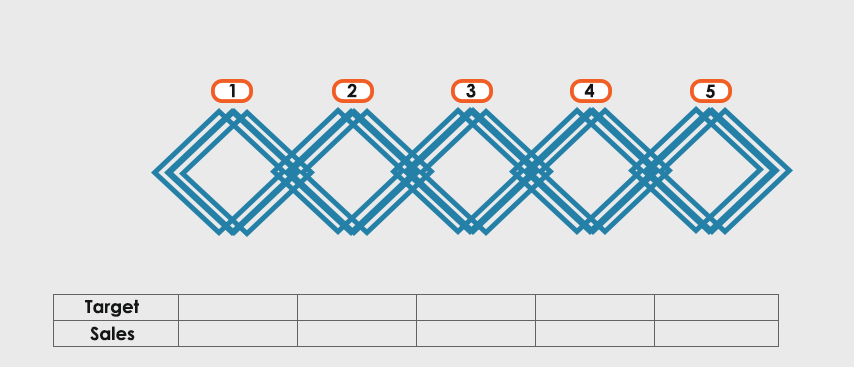
<style>
.page{position:relative;width:854px;height:367px;background:#eaeaea}
.page>*{position:absolute;margin:0}
.t1{font:18.2px "CenturyGothic-Bold";color:#151616}
.t2{font:18.1px "CenturyGothic-Bold";color:#151616}
.t3{font:18px "CenturyGothic-Bold";color:#151616}
</style>
<div class="page">
<p class="t1" style="left:229px;top:84px;width:6px;height:14px">1</p>
<p class="t1" style="left:347px;top:83px;width:10px;height:15px">2</p>
<p class="t1" style="left:466px;top:83px;width:10px;height:15px">3</p>
<p class="t1" style="left:584px;top:83px;width:11px;height:15px">4</p>
<p class="t2" style="left:705px;top:84px;width:10px;height:14px">5</p>
<p class="t3" style="left:85px;top:299px;width:54px;height:18px">Target</p>
<p class="t3" style="left:90px;top:326px;width:45px;height:15px">Sales</p>
</div>
